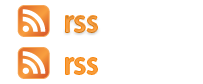
<style>
.page{position:relative;width:203px;height:84px;background:#ffffff}
.page>*{position:absolute;margin:0}
.t1{font:31.5px "MyriadPro-Regular";color:#f79c3d}
</style>
<div class="page">
<p class="t1" style="left:66px;top:16px;width:31px;height:16px">rss</p>
</div>
